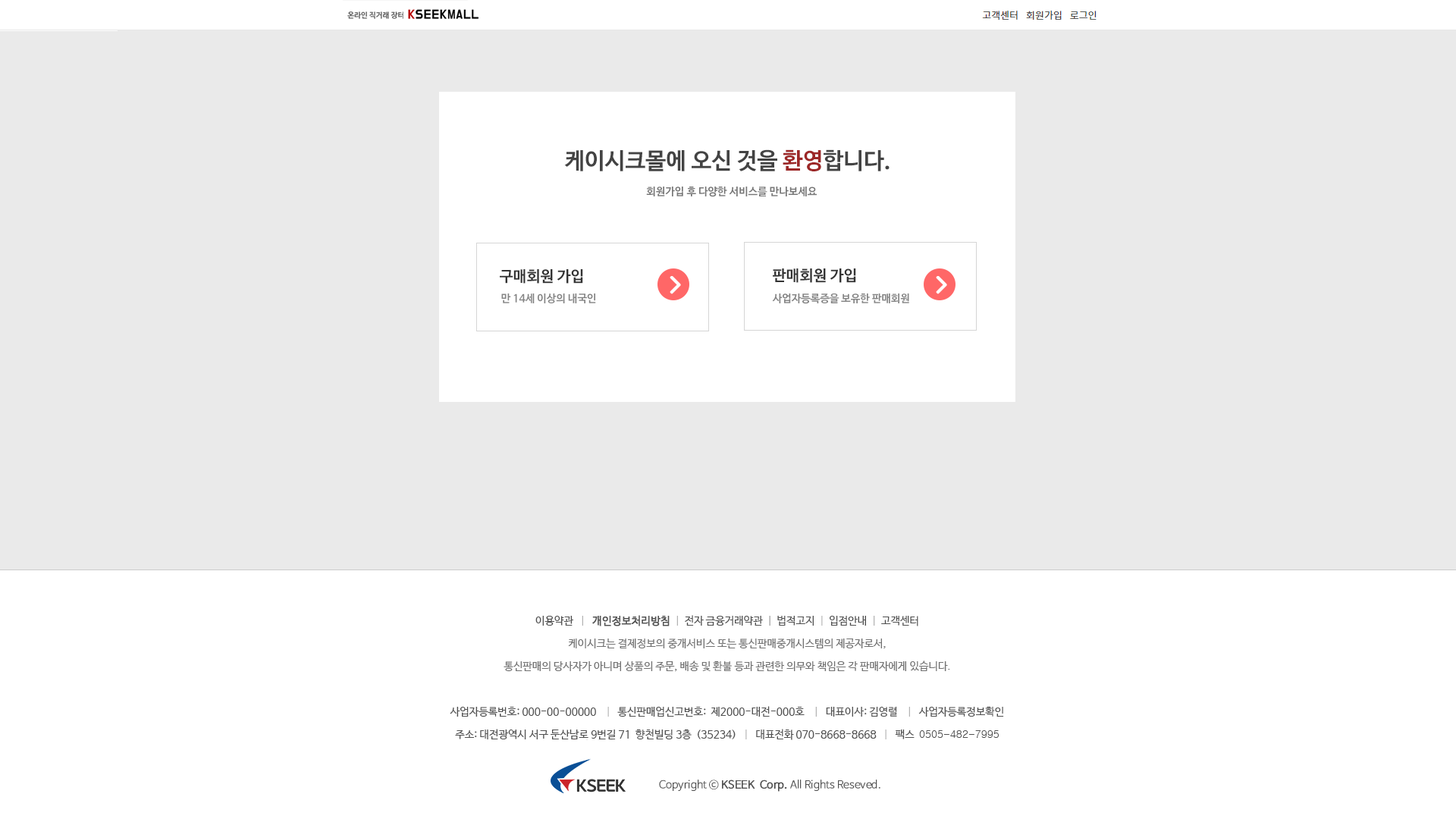
<style>
.page{position:relative;width:1456px;height:819px;background:#eaeaea}
.page>*{position:absolute;margin:0}
.t1{font:22.7px "NanumBarunGothicBold";color:#434343}
.t2{font:22.7px "NanumBarunGothicBold";color:#9c2727}
.t3{font:10.6px "NanumBarunGothicBold";color:#767676}
.t4{font:15.2px "NanumBarunGothicBold";color:#333333}
.t5{font:10.6px "NanumBarunGothicBold";color:#848484}
.t6{font:10.6px/22.7px "NanumBarunGothic";color:#727272}
.t7{font:10.6px/22.7px "NanumBarunGothic";color:#515151}
.t8{font:10.6px/22.7px "NanumBarunGothic";color:#b3b3b3}
.t9{font:10.6px/22.7px "NanumBarunGothic";color:#515151;font-weight:bold}
.t10{font:10.6px/22.7px "NanumBarunGothic";color:#949494}
.t11{font:10.6px/22.7px "Gulim";color:#515151}
.t12{font:10.6px "NanumBarunGothicOTFLight";color:#515151}
.t13{font:10.6px "NanumBarunGothicOTFLight";color:#515151;font-weight:bold}
</style>
<div class="page">
<p class="t1" style="left:564px;top:149px;width:326px;height:22px">케이시크몰에 오신 것을 <span class="t2">환영</span>합니다.</p>
<p class="t3" style="left:646px;top:187px;width:171px;height:10px">회원가입 후 다양한 서비스를 만나보세요</p>
<p class="t4" style="left:500px;top:269px;width:83px;height:15px">구매회원 가입</p>
<p class="t4" style="left:773px;top:268px;width:83px;height:15px">판매회원 가입</p>
<p class="t5" style="left:501px;top:293px;width:95px;height:10px">만 14세 이상의 내국인</p>
<p class="t5" style="left:772px;top:293px;width:137px;height:11px">사업자등록증을 보유한 판매회원</p>
<p class="t6" style="left:450px;top:615px;width:554px;height:125px;text-align:center"><span class="t7">이용약관  </span><span class="t8"> |   </span><span class="t9">개인정보처리방침</span><span class="t8">  |  </span><span class="t7">전자 금융거래약관</span><span class="t10">  |  </span><span class="t7">법적고지</span><span class="t8">  | </span><span class="t7"> 입점안내 </span><span class="t8"> |  </span><span class="t7">고객센터<br></span>케이시크는 결제정보의 중개서비스 또는 통신판매중개시스템의 제공자로서, <br>통신판매의 당사자가 아니며 상품의 주문, 배송 및 환불 등과 관련한 의무와 책임은 각 판매자에게 있습니다.<br><span class="t7"><br>사업자등록번호: 000-00-00000   </span><span class="t8"> | </span><span class="t7">  통신판매업신고번호:  제2000-대전-000호  </span><span class="t8">  |   </span><span class="t7">대표이사: 김영렬 </span><span class="t8">   |   </span><span class="t7">사업자등록정보확인<br>주소: 대전광역시 서구 둔산남로 9번길 71  향천빌딩 3층  (35234)</span><span class="t8">   |  </span><span class="t7"> 대표전화 070-8668-8668 </span><span class="t8">  |  </span><span class="t7"> 팩스  </span><span class="t11">0505-482-7995</span></p>
<p class="t12" style="left:659px;top:780px;width:221px;height:12px">Copyright ⓒ <span class="t13">KSEEK  Corp.</span> All Rights Reseved.</p>
</div>
